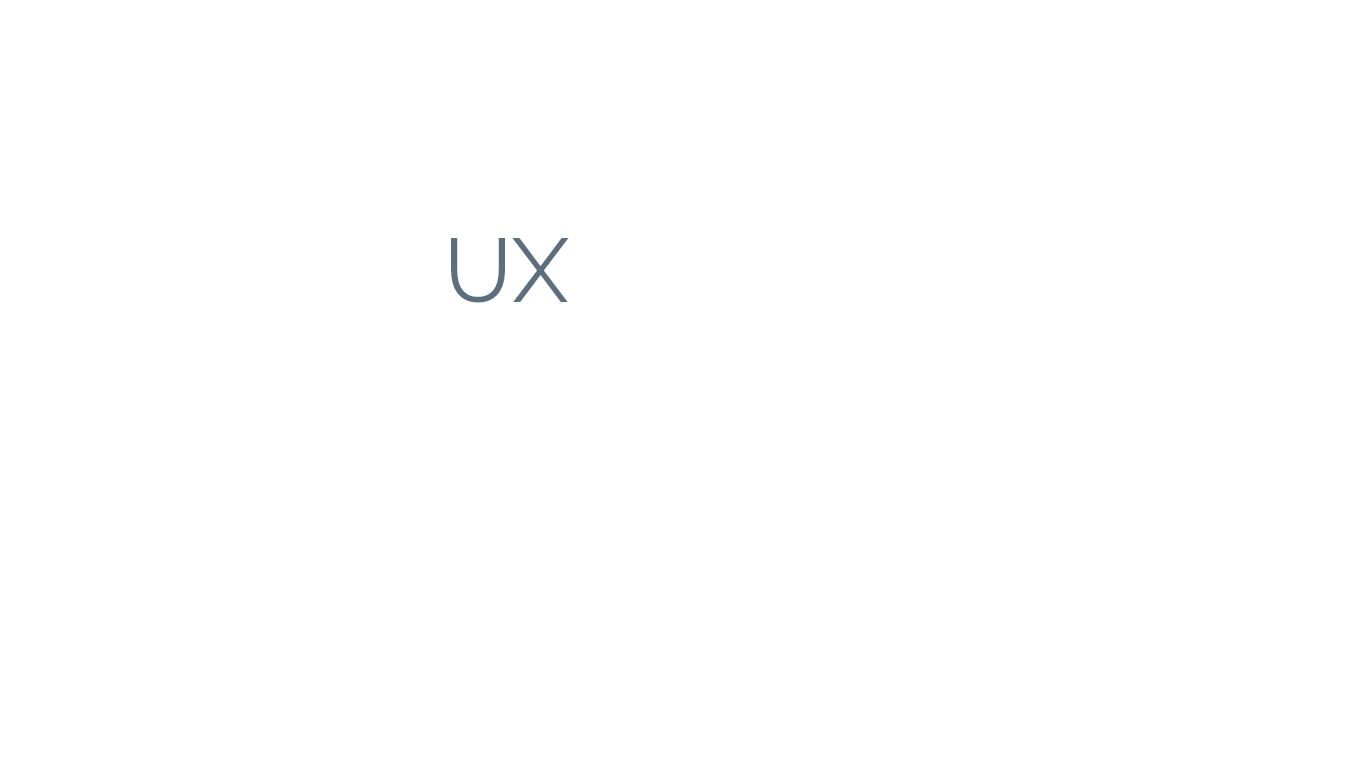
<style>
.page{position:relative;width:1366px;height:768px;background:#ffffff}
.page>*{position:absolute;margin:0}
.t1{font:90px "Raleway-Regular";color:#5d6f7d;text-transform:uppercase}
</style>
<div class="page">
<p class="t1" style="left:451px;top:238px;width:118px;height:65px">ux</p>
</div>
